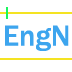
<style>
.page{position:relative;width:72px;height:72px;background:#ffffff}
.page>*{position:absolute;margin:0}
.t1{font:30px "FranklinGothic-Medium";color:#3da5ee}
</style>
<div class="page">
<p class="t1" style="left:5px;top:25px;width:64px;height:26px">EngN</p>
</div>
